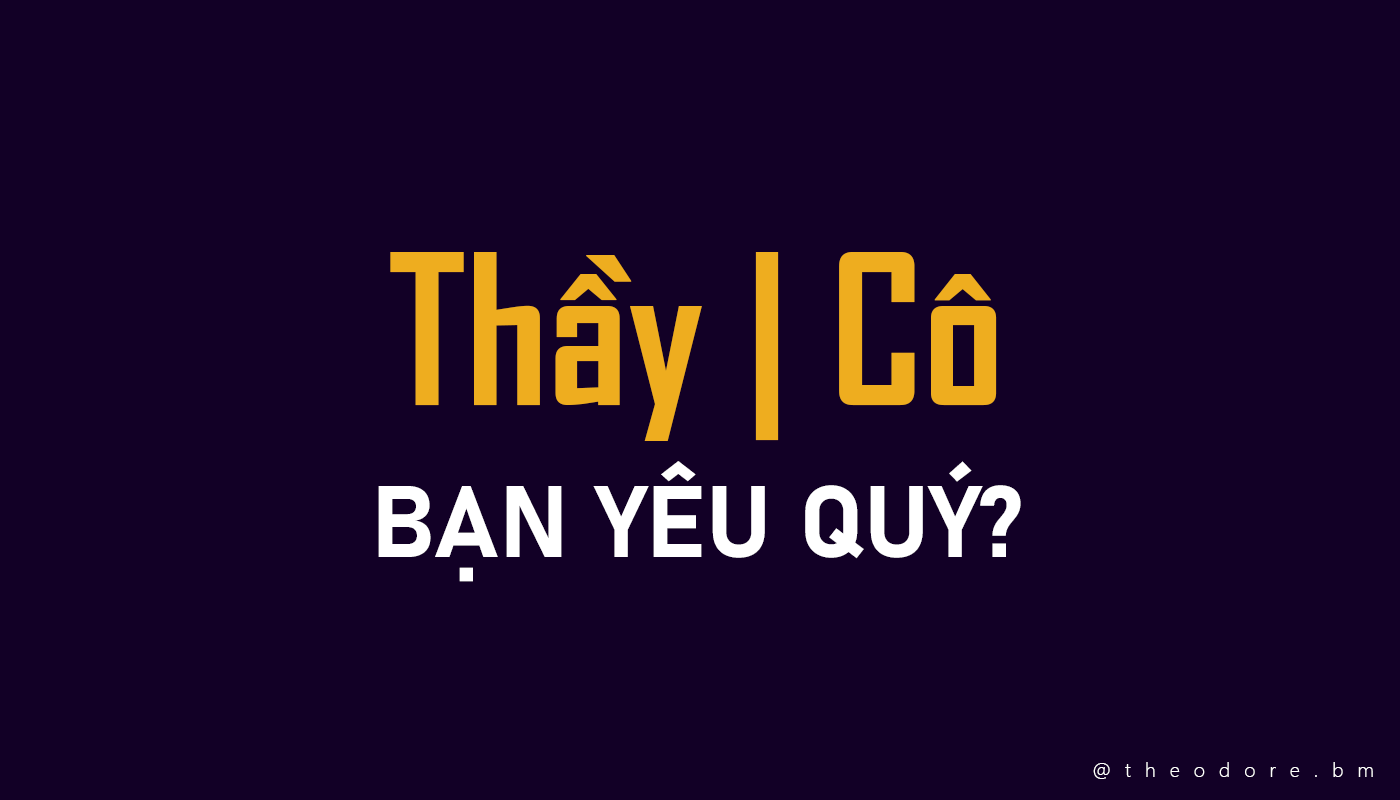
<style>
.page{position:relative;width:1400px;height:800px;background:#120026}
.page>*{position:absolute;margin:0}
.t1{font:200px "SVN-AgencyFBbold";color:#eead1f}
.t2{font:100px "Bahnschrift-Bold";color:#ffffff}
.t3{font:20px "SegoeUI-Light";letter-spacing:0.7em;color:#ffffff}
</style>
<div class="page">
<p class="t1" style="left:390px;top:252px;width:607px;height:189px">Thầy | Cô</p>
<p class="t2" style="left:378px;top:461px;width:643px;height:121px">BẠN YÊU QUÝ?</p>
<p class="t3" style="left:1093px;top:762px;width:280px;height:17px">@theodore.bm</p>
</div>
